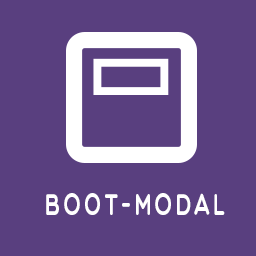
<style>
.page{position:relative;width:256px;height:256px;background:#593f7f}
.page>*{position:absolute;margin:0}
.t1{font:30px "Multicolore";letter-spacing:0.148em;color:#ffffff;scale:0.7 1}
</style>
<div class="page">
<p class="t1" style="left:46px;top:193px;width:179px;height:22px">Boot-Modal</p>
</div>
